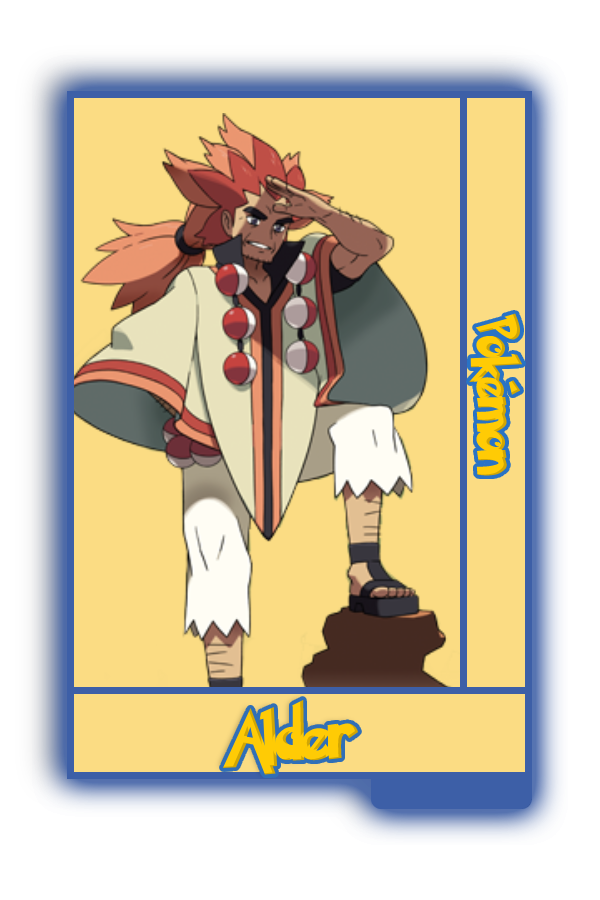
<style>
.page{position:relative;width:600px;height:900px;background:#fbdc83}
.page>*{position:absolute;margin:0}
.t1{font:48.8px "PokemonSolidNormal";color:#ffcb05;scale:0.8 1}
.t2{font:56.6px "PokemonSolidNormal";color:#ffcb05;scale:0.92 1}
</style>
<div class="page">
<p class="t1" style="left:469px;top:313px;width:54px;height:163px;rotate:90deg">Pokémon</p>
<p class="t2" style="left:222px;top:699px;width:137px;height:76px">Alder</p>
</div>
